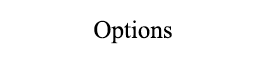
<style>
.page{position:relative;width:266px;height:60px;background:#ffffff}
.page>*{position:absolute;margin:0}
.t1{font:25px "TimesNewRomanPSMT";color:#000000}
</style>
<div class="page">
<p class="t1" style="left:94px;top:20px;width:78px;height:24px">Options</p>
</div>
